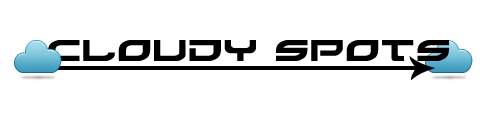
<style>
.page{position:relative;width:492px;height:115px;background:#ffffff}
.page>*{position:absolute;margin:0}
.t1{font:36px "Battlefield";color:#000000}
</style>
<div class="page">
<p class="t1" style="left:48px;top:40px;width:401px;height:21px">Cloudy Spots</p>
</div>
